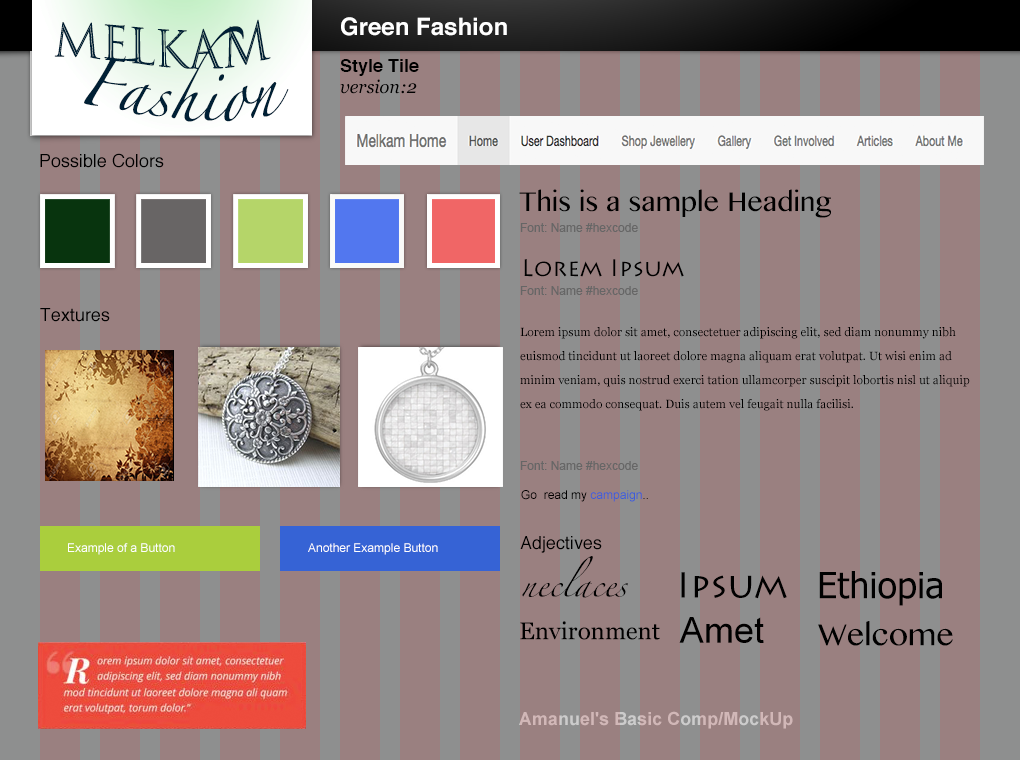
<style>
.page{position:relative;width:1020px;height:760px;background:#9a8080}
.page>*{position:absolute;margin:0}
.t1{font:24px "Helvetica-Bold";color:#ffffff}
.t2{font:46px/24px "Zapfino";color:#002035}
.t3{font:48px/24px "TrajanColor-Concept";color:#002035}
.t4{font:18px "Helvetica-Bold";color:#000000}
.t5{font:18px "Georgia-Italic";color:#000000}
.t6{font:18px "Helvetica";color:#000000}
.t7{font:32px "KhmerMN";color:#000000}
.t8{font:12px "ArialMT";color:#666666}
.t9{font:24px "LithosPro-Regular";color:#000000}
.t10{font:12px/24px "Georgia";color:#000000}
.t11{font:12px "ArialMT";color:#000000}
.t12{font:12px "ArialMT";color:#3e5dd8}
.t13{font:12px "ArialMT";color:#ffffff}
.t14{font:24px/24px "Zapfino";color:#000000}
.t15{font:36px "LithosPro-Regular";color:#000000}
.t16{font:36px "Tahoma";color:#000000}
.t17{font:36px "ArialMT";color:#000000}
.t18{font:24px "Georgia";color:#000000}
.t19{font:36px "KhmerMN";color:#000000}
.t20{font:18px "Arial-BoldMT";color:#cccccc}
</style>
<div class="page">
<p class="t1" style="left:341px;top:17px;width:166px;height:19px">Green Fashion</p>
<p class="t2" style="left:54px;top:19px;width:235px;height:103px;text-align:center"><span class="t3">     Melkam<br><br></span>   Fashion</p>
<p class="t4" style="left:340px;top:59px;width:79px;height:17px">Style Tile</p>
<p class="t5" style="left:340px;top:79px;width:77px;height:15px">version:2</p>
<p class="t6" style="left:40px;top:153px;width:124px;height:15px">Possible Colors</p>
<p class="t7" style="left:519px;top:189px;width:312px;height:29px">This is a sample Heading</p>
<p class="t8" style="left:520px;top:223px;width:118px;height:9px">Font: Name #hexcode</p>
<p class="t9" style="left:524px;top:259px;width:160px;height:18px">Lorem Ipsum</p>
<p class="t8" style="left:520px;top:286px;width:118px;height:9px">Font: Name #hexcode</p>
<p class="t6" style="left:40px;top:308px;width:70px;height:14px">Textures</p>
<p class="t10" style="left:520px;top:327px;width:450px;height:84px">Lorem ipsum dolor sit amet, consectetuer adipiscing elit, sed diam nonummy nibh euismod tincidunt ut laoreet dolore magna aliquam erat volutpat. Ut wisi enim ad minim veniam, quis nostrud exerci tation ullamcorper suscipit lobortis nisl ut aliquip ex ea commodo consequat. Duis autem vel feugait nulla facilisi.</p>
<p class="t8" style="left:520px;top:461px;width:118px;height:9px">Font: Name #hexcode</p>
<p class="t11" style="left:521px;top:490px;width:127px;height:12px">Go  read my <span class="t12">campaign</span>..</p>
<p class="t13" style="left:68px;top:543px;width:107px;height:12px">Example of a Button</p>
<p class="t13" style="left:308px;top:543px;width:130px;height:12px">Another Example Button</p>
<p class="t6" style="left:520px;top:536px;width:82px;height:17px">Adjectives</p>
<p class="t14" style="left:522px;top:556px;width:106px;height:42px">neclaces</p>
<p class="t15" style="left:681px;top:572px;width:106px;height:27px">Ipsum</p>
<p class="t16" style="left:819px;top:571px;width:123px;height:35px">Ethiopia</p>
<p class="t17" style="left:679px;top:617px;width:85px;height:26px">Amet</p>
<p class="t18" style="left:520px;top:621px;width:140px;height:19px">Environment</p>
<p class="t19" style="left:818px;top:621px;width:135px;height:25px">Welcome</p>
<p class="t20" style="left:519px;top:711px;width:274px;height:18px">Amanuel's Basic Comp/MockUp</p>
</div>
